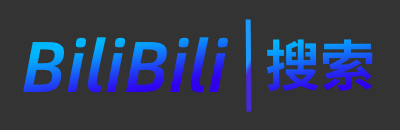
<style>
.page{position:relative;width:400px;height:130px;background:#333333}
.page>*{position:absolute;margin:0}
.t1{font:72px "AlibabaSans-MediumItalic"}
.t2{font:55px "SourceHanSansSC-Bold"}
</style>
<div class="page">
<p class="t1" style="left:23px;top:37px;width:205px;height:56px">BiliBili</p>
<p class="t2" style="left:266px;top:39px;width:107px;height:52px">搜索</p>
</div>
